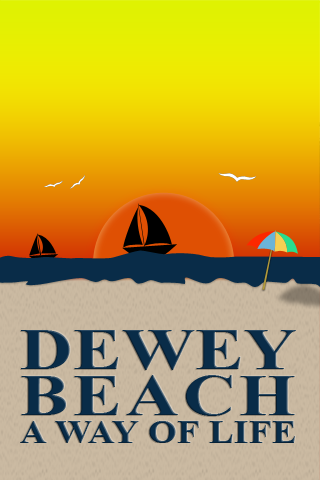
<style>
.page{position:relative;width:320px;height:480px}
.page>*{position:absolute;margin:0}
.t1{font:32.9px/28.4px "TimesNewRomanPS-BoldMT";letter-spacing:0.023em;color:#092c48;text-transform:uppercase;scale:1.11 1}
.t2{font:58.4px/45.6px "TimesNewRomanPS-BoldMT";color:#092c48;text-transform:uppercase;scale:1.25 1}
.t3{font:58.4px/45.6px "TimesNewRomanPS-BoldMT";letter-spacing:0.055em;color:#092c48;text-transform:uppercase;scale:1.25 1}
</style>
<div class="page">
<p class="t1" style="left:20px;top:330px;width:276px;height:113px"><span class="t2">Dewey<br></span><span class="t3">Beach<br></span>A way of Life</p>
</div>
